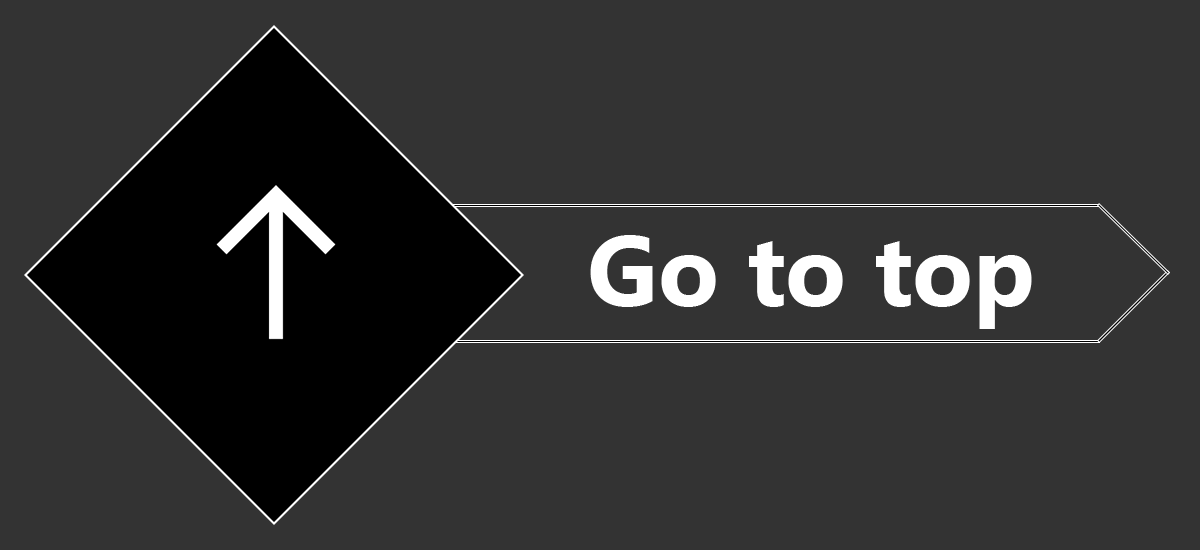
<style>
.page{position:relative;width:1200px;height:550px;background:#333333}
.page>*{position:absolute;margin:0}
.t1{font:100px "KhmerUI-Bold";color:#ffffff}
</style>
<div class="page">
<p class="t1" style="left:590px;top:235px;width:442px;height:94px">Go to top</p>
</div>
